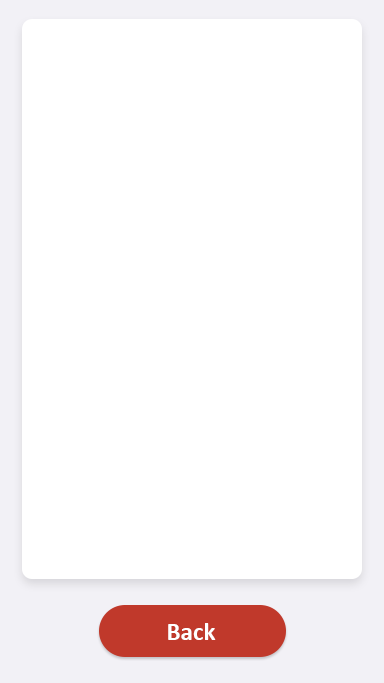
<style>
.page{position:relative;width:384px;height:683px;background:#ffffff}
.page>*{position:absolute;margin:0}
.t1{font:25px "Calibri-Bold";color:#ffffff}
</style>
<div class="page">
<p class="t1" style="left:168px;top:623px;width:48px;height:17px">Back</p>
</div>
